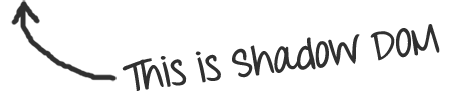
<style>
.page{position:relative;width:455px;height:95px;background:#ffffff}
.page>*{position:absolute;margin:0}
.t1{font:40.3px "ThrowMyHandsUpintheAir-Bold";color:#303030}
</style>
<div class="page">
<p class="t1" style="left:122px;top:24px;width:318px;height:67px;rotate:-7deg">This is Shadow DOM</p>
</div>
